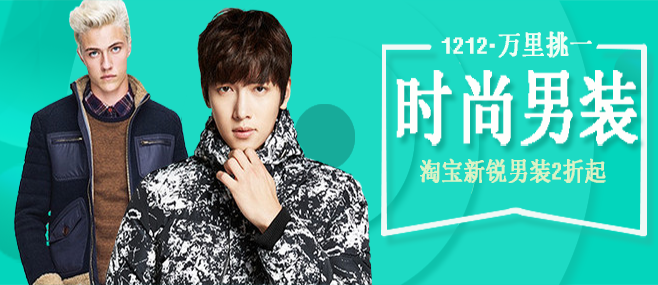
<style>
.page{position:relative;width:658px;height:285px;background:#1ddac4}
.page>*{position:absolute;margin:0}
.t1{font:28.2px "Fixedsys";color:#eefef4;font-weight:bold;scale:0.83 1}
.t2{font:28.2px "System";color:#eefef4;font-weight:bold;scale:0.83 1}
.t3{font:26px "System";color:#dbf2c4;font-weight:bold;scale:0.83 1}
</style>
<div class="page">
<p class="t1" style="left:441px;top:37px;width:46px;height:17px">1212</p>
<p class="t2" style="left:498px;top:31px;width:94px;height:27px">万里挑一</p>
<p class="t1" style="left:489px;top:43px;width:6px;height:5px">.</p>
<p class="t3" style="left:420px;top:158px;width:186px;height:25px">淘宝新锐男装2折起</p>
</div>
